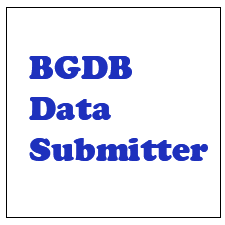
<style>
.page{position:relative;width:225px;height:225px;background:#ffffff}
.page>*{position:absolute;margin:0}
.t1{font:34px "CooperBlack";color:#1e31bd}
</style>
<div class="page">
<p class="t1" style="left:29px;top:56px;width:179px;height:105px">BGDB<br>Data<br>Submitter</p>
</div>
